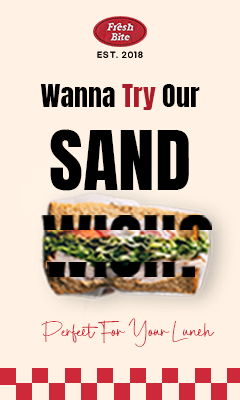
<style>
.page{position:relative;width:240px;height:400px;background:#fff2e4}
.page>*{position:absolute;margin:0}
.t1{font:7.3px "GmarketSansMedium";letter-spacing:0.15em;color:#000000}
.t2{font:26.5px "Anton-Regular";color:#000000;scale:1.06 1}
.t3{font:26.5px "Anton-Regular";color:#ab1c2a;scale:1.06 1}
.t4{font:69.5px "Anton-Regular";color:#000000;scale:1.06 1}
.t5{font:26.3px "SabrinaDestiny";letter-spacing:-0.05em;color:#ce2939;scale:1.05 1}
</style>
<div class="page">
<p class="t1" style="left:97px;top:51px;width:46px;height:7px">EST. 2018</p>
<p class="t2" style="left:40px;top:84px;width:160px;height:26px">Wanna <span class="t3">Try </span>Our</p>
<p class="t4" style="left:50px;top:129px;width:139px;height:62px">SAND</p>
<p class="t5" style="left:41px;top:318px;width:174px;height:29px">Perfect For Your Lunch</p>
</div>
